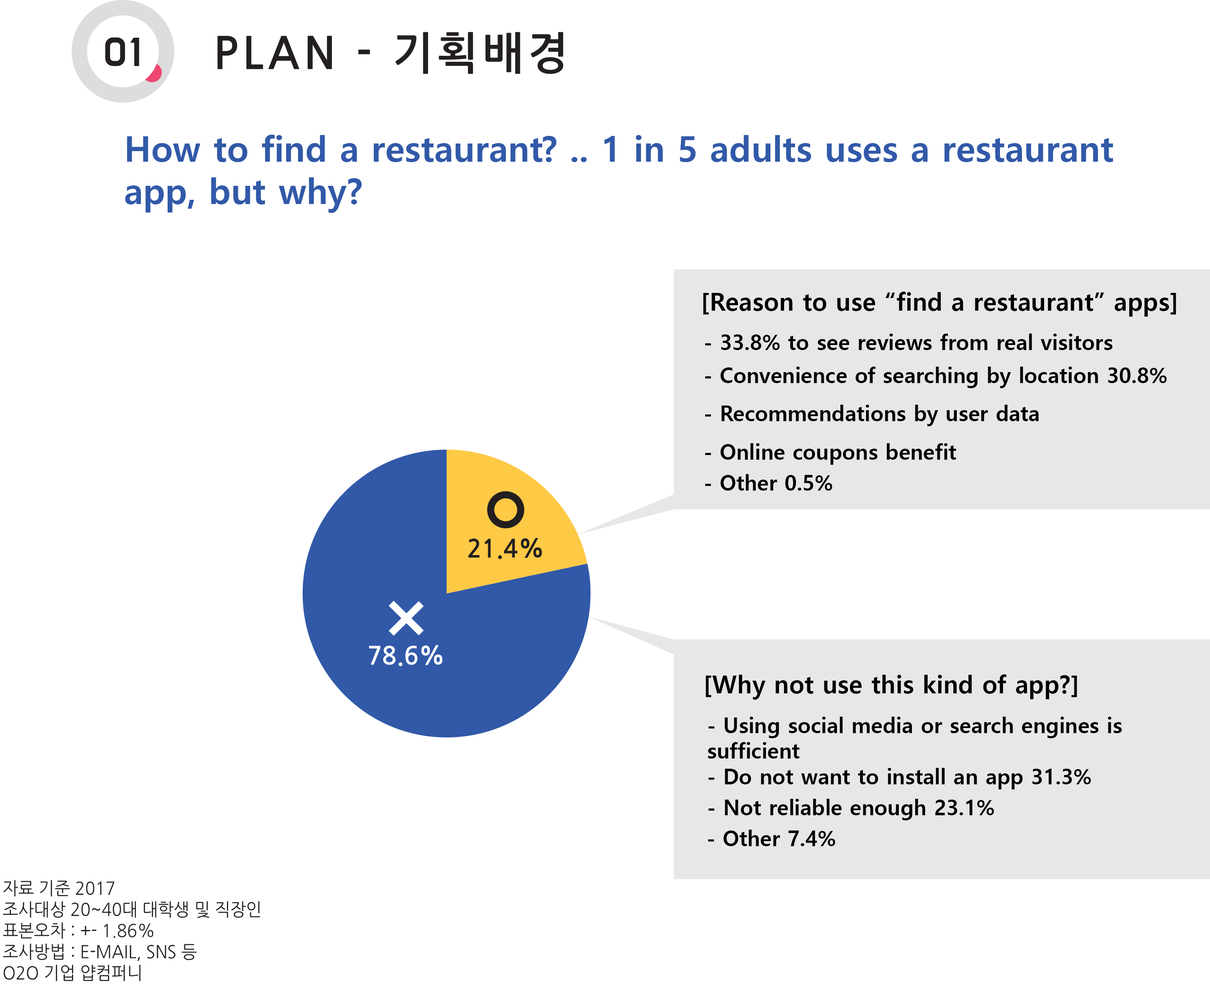
<style>
.page{position:relative;width:1210px;height:985px;background:#ffffff}
.page>*{position:absolute;margin:0}
.t1{font:35.3px "MalgunGothicBold";color:#3159a8}
.t2{font:24.7px "MalgunGothicBold";color:#000000}
.t3{font:21.2px "MalgunGothicBold";color:#000000}
</style>
<div class="page">
<p class="t1" style="left:125px;top:135px;width:988px;height:78px">How to find a restaurant? .. 1 in 5 adults uses a restaurant<br>app, but why?</p>
<p class="t2" style="left:703px;top:292px;width:473px;height:25px">[Reason to use “find a restaurant” apps]</p>
<p class="t3" style="left:705px;top:334px;width:408px;height:16px">- 33.8% to see reviews from real visitors</p>
<p class="t3" style="left:705px;top:367px;width:462px;height:21px">- Convenience of searching by location 30.8%</p>
<p class="t3" style="left:705px;top:405px;width:334px;height:21px">- Recommendations by user data</p>
<p class="t3" style="left:705px;top:443px;width:251px;height:22px">- Online coupons benefit</p>
<p class="t3" style="left:705px;top:474px;width:127px;height:17px">- Other 0.5%</p>
<p class="t2" style="left:706px;top:675px;width:371px;height:25px">[Why not use this kind of app?]</p>
<p class="t3" style="left:708px;top:717px;width:414px;height:42px">- Using social media or search engines is <br>sufficient</p>
<p class="t3" style="left:708px;top:768px;width:383px;height:22px">- Do not want to install an app 31.3%</p>
<p class="t3" style="left:708px;top:799px;width:286px;height:22px">- Not reliable enough 23.1%</p>
<p class="t3" style="left:708px;top:830px;width:127px;height:16px">- Other 7.4%</p>
</div>
